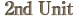
<style>
.page{position:relative;width:73px;height:19px;background:#ffffff}
.page>*{position:absolute;margin:0}
.t1{font:18px "RyuminPro-ExBold";letter-spacing:-0.04em;font-weight:bold}
.t2{font:18px "RyuminPro-ExBold";letter-spacing:-0.08em;font-weight:bold}
</style>
<div class="page">
<p class="t1" style="left:4px;top:1px;width:70px;height:15px"><span class="t2">2nd</span> Unit</p>
</div>
